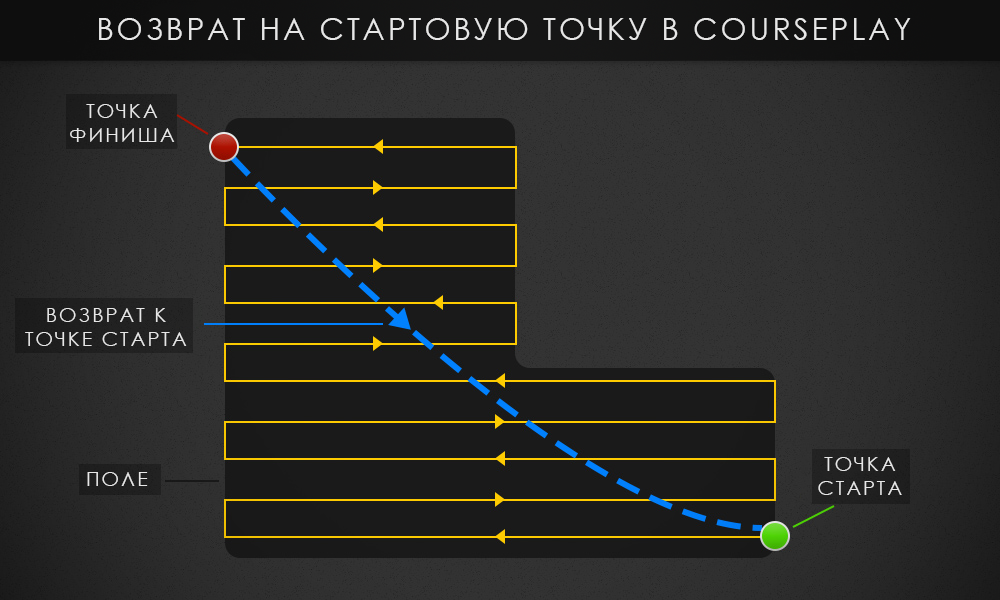
<style>
.page{position:relative;width:1000px;height:600px;background:#1a1a1a}
.page>*{position:absolute;margin:0}
.t1{font:30px "CenturyGothic";letter-spacing:0.1em;color:#e7e7e7}
.t2{font:20px "CenturyGothic";letter-spacing:0.1em;color:#e7e7e7}
</style>
<div class="page">
<p class="t1" style="left:99px;top:18px;width:812px;height:22px">ВОЗВРАТ НА СТАРТОВУЮ ТОЧКУ В COURSEPLAY</p>
<p class="t2" style="left:70px;top:104px;width:105px;height:38px;text-align:center">ТОЧКА<br>ФИНИША</p>
<p class="t2" style="left:25px;top:308px;width:162px;height:38px;text-align:center">ВОЗВРАТ К<br>ТОЧКЕ СТАРТА</p>
<p class="t2" style="left:818px;top:457px;width:84px;height:38px;text-align:center">ТОЧКА<br>СТАРТА</p>
<p class="t2" style="left:87px;top:472px;width:61px;height:14px">ПОЛЕ</p>
</div>
